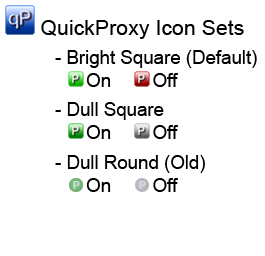
<style>
.page{position:relative;width:265px;height:256px;background:#ffffff}
.page>*{position:absolute;margin:0}
.t1{font:21.3px "ArialMT";color:#000000}
.t2{font:18.7px "ArialMT";color:#000000}
</style>
<div class="page">
<p class="t1" style="left:41px;top:20px;width:203px;height:19px">QuickProxy Icon Sets</p>
<p class="t2" style="left:55px;top:50px;width:202px;height:37px">- Bright Square (Default)<br>      On        Off</p>
<p class="t2" style="left:55px;top:102px;width:123px;height:37px">- Dull Square<br>      On        Off</p>
<p class="t2" style="left:55px;top:155px;width:150px;height:37px">- Dull Round (Old)<br>      On        Off</p>
</div>
